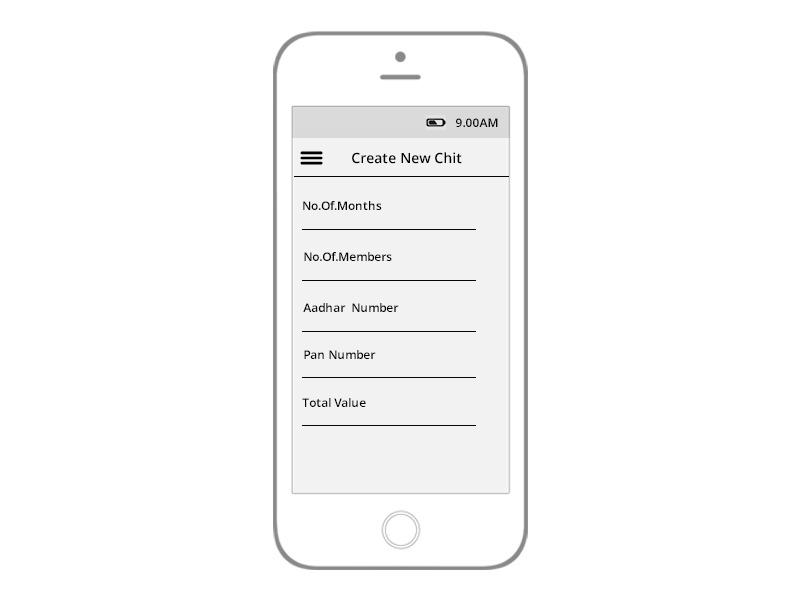
<style>
.page{position:relative;width:800px;height:600px;background:#ffffff}
.page>*{position:absolute;margin:0}
.t1{font:12px "OpenSans-Semibold";color:#030303}
.t2{font:14px "OpenSans-Semibold";color:#030303}
</style>
<div class="page">
<p class="t1" style="left:456px;top:118px;width:42px;height:9px">9.00AM</p>
<p class="t2" style="left:352px;top:152px;width:110px;height:12px">Create New Chit</p>
<p class="t1" style="left:303px;top:201px;width:79px;height:9px">No.Of.Months</p>
<p class="t1" style="left:304px;top:252px;width:88px;height:9px">No.Of.Members</p>
<p class="t1" style="left:303px;top:303px;width:96px;height:9px">Aadhar  Number</p>
<p class="t1" style="left:304px;top:350px;width:72px;height:9px">Pan Number</p>
<p class="t1" style="left:302px;top:398px;width:64px;height:9px">Total Value</p>
</div>
